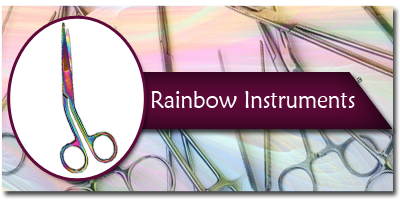
<style>
.page{position:relative;width:400px;height:200px;background:#ffffff}
.page>*{position:absolute;margin:0}
.t1{font:24px "MaiandraGD-Regular";color:#ffffff;scale:0.93 1}
</style>
<div class="page">
<p class="t1" style="left:151px;top:91px;width:204px;height:17px">Rainbow Instruments</p>
</div>
